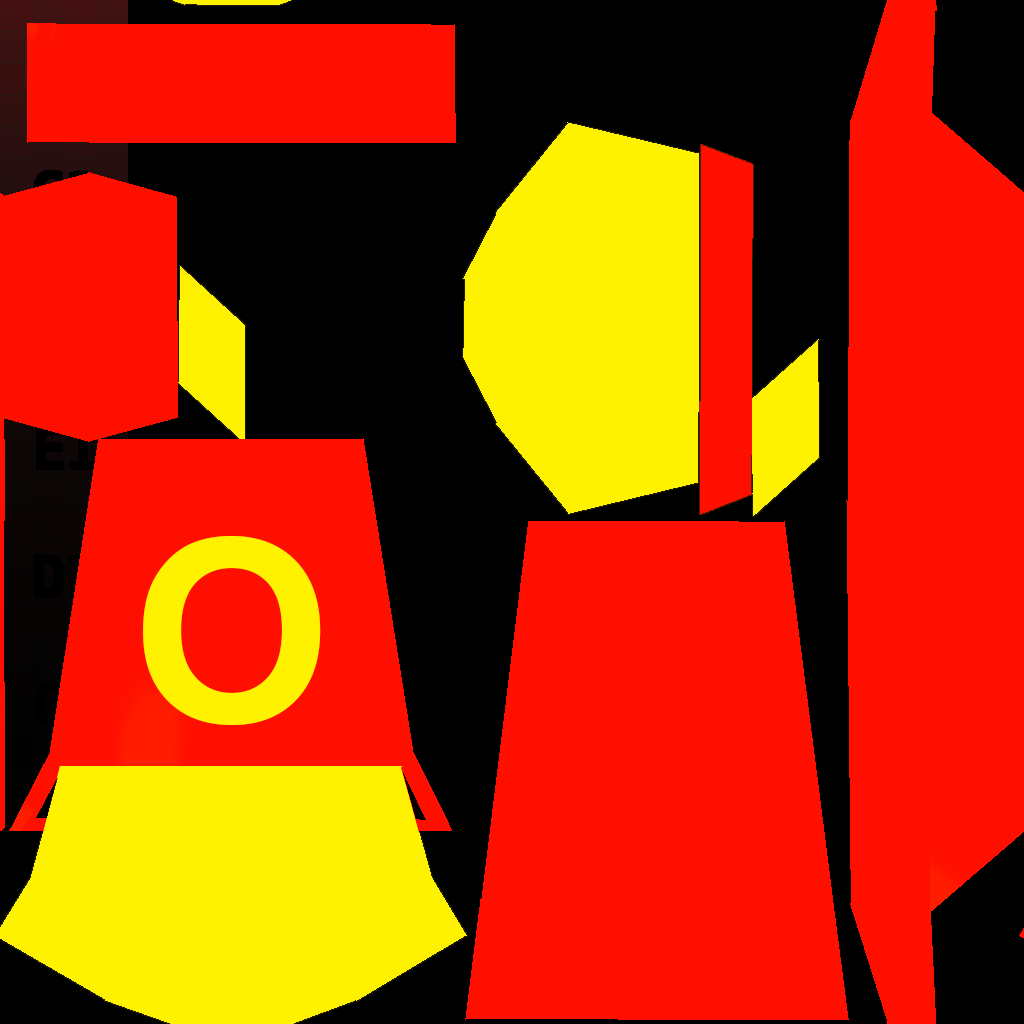
<style>
.page{position:relative;width:1024px;height:1024px;background:#ff0f00}
.page>*{position:absolute;margin:0}
.t1{font:255.2px "Arial-BoldMT";color:#fff200}
</style>
<div class="page">
<p class="t1" style="left:143px;top:536px;width:178px;height:189px">O</p>
</div>
